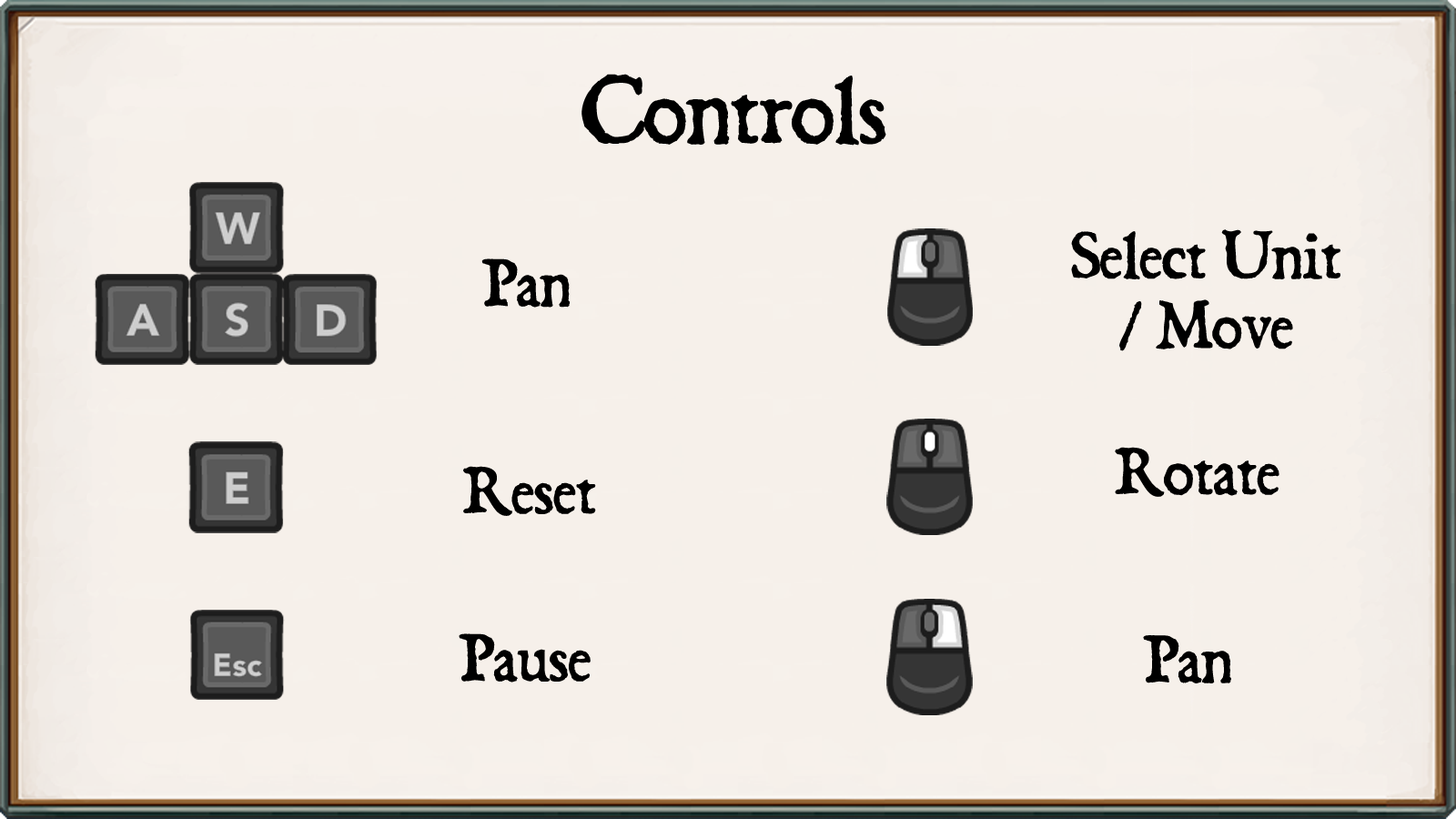
<style>
.page{position:relative;width:1456px;height:819px;background:#f6f0ea}
.page>*{position:absolute;margin:0}
.t1{font:83.7px "Dominican";color:#000000}
.t2{font:58.2px "Dominican";color:#000000}
</style>
<div class="page">
<p class="t1" style="left:581px;top:74px;width:305px;height:72px">Controls</p>
<p class="t2" style="left:1071px;top:229px;width:269px;height:122px;text-align:center">Select Unit<br>/ Move</p>
<p class="t2" style="left:481px;top:258px;width:90px;height:50px">Pan</p>
<p class="t2" style="left:1115px;top:447px;width:164px;height:50px">Rotate</p>
<p class="t2" style="left:463px;top:466px;width:133px;height:50px">Reset</p>
<p class="t2" style="left:459px;top:633px;width:132px;height:49px">Pause</p>
<p class="t2" style="left:1143px;top:635px;width:88px;height:48px">Pan</p>
</div>
